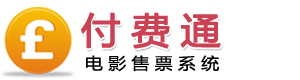
<style>
.page{position:relative;width:300px;height:80px;background:#ffffff}
.page>*{position:absolute;margin:0}
.t1{font:36px "MicrosoftYaHei";letter-spacing:0.22em;color:#cb4255;font-weight:bold;scale:1.11 1}
.t2{font:16.2px "MicrosoftYaHei";letter-spacing:0.29em;color:#000000;scale:1.11 1}
</style>
<div class="page">
<p class="t1" style="left:80px;top:12px;width:141px;height:37px">付费通</p>
<p class="t2" style="left:86px;top:55px;width:133px;height:17px">电影售票系统</p>
</div>
